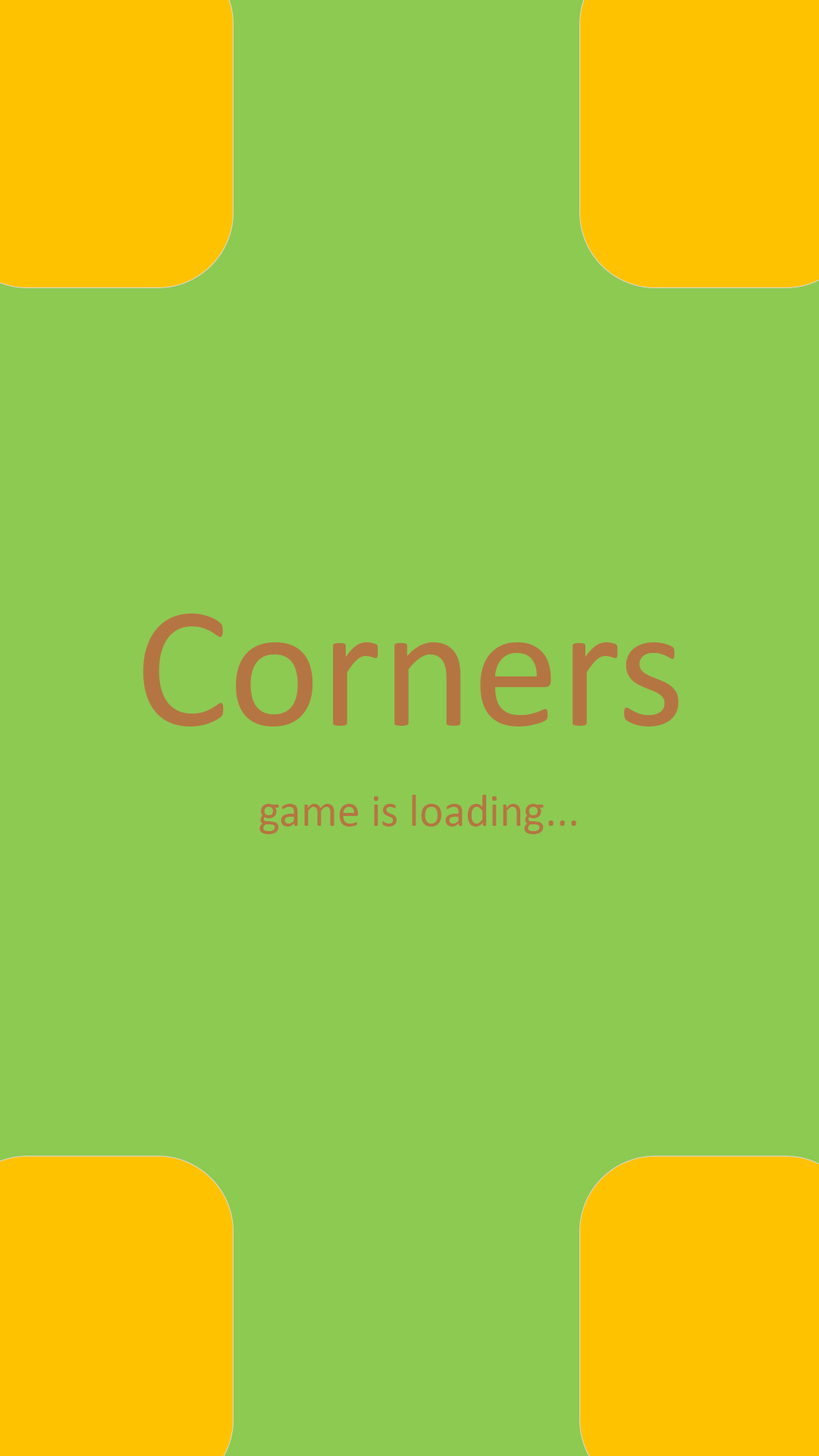
<style>
.page{position:relative;width:819px;height:1456px;background:#8cca52}
.page>*{position:absolute;margin:0}
.t1{font:174.4px "Calibri";color:#b57542}
.t2{font:45.5px "Calibri";color:#b57542}
</style>
<div class="page">
<p class="t1" style="left:143px;top:613px;width:536px;height:113px">Corners</p>
<p class="t2" style="left:259px;top:795px;width:317px;height:39px">...game is loading</p>
</div>
